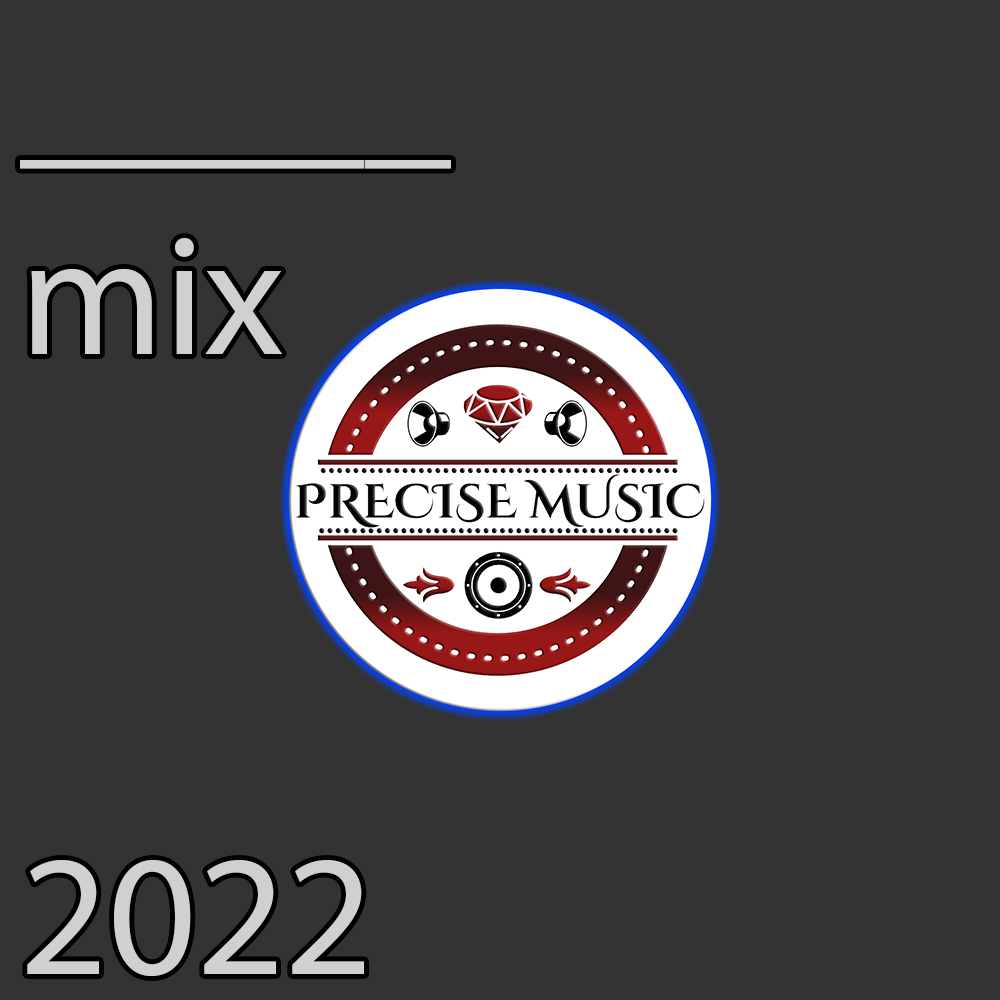
<style>
.page{position:relative;width:1000px;height:1000px;background:#333333}
.page>*{position:absolute;margin:0}
.t1{font:172.4px "MyriadPro-Regular";color:#d0d0d0}
</style>
<div class="page">
<p class="t1" style="left:20px;top:160px;width:431px;height:816px">_____<br>mix<br><br><br>2022</p>
</div>
